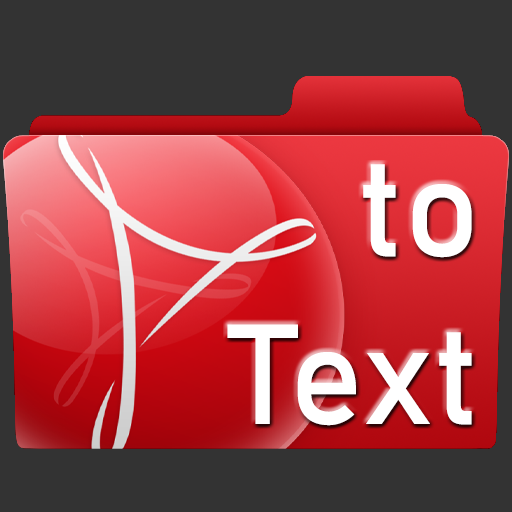
<style>
.page{position:relative;width:512px;height:512px;background:#333333}
.page>*{position:absolute;margin:0}
.t1{font:140px "Bahnschrift";color:#ffffff}
</style>
<div class="page">
<p class="t1" style="left:227px;top:164px;width:245px;height:262px;text-align:right">to<br>Text</p>
</div>
